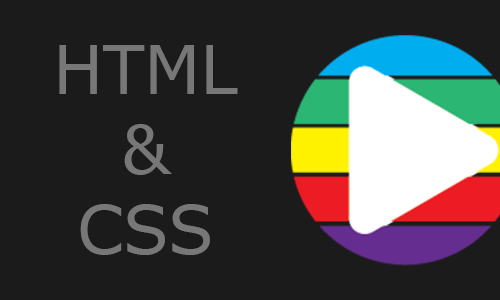
<style>
.page{position:relative;width:500px;height:300px;background:#1b1b1b}
.page>*{position:absolute;margin:0}
.t1{font:66.7px "Verdana";color:#777777}
</style>
<div class="page">
<p class="t1" style="left:59px;top:45px;width:179px;height:210px;text-align:center">HTML<br>&amp;<br>CSS</p>
</div>
